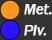
<style>
.page{position:relative;width:52px;height:40px;background:#333333}
.page>*{position:absolute;margin:0}
.t1{font:25px "FranklinGothic-MediumItalic";color:#f3f3f3;font-weight:bold}
</style>
<div class="page">
<p class="t1" style="left:24px;top:4px;width:28px;height:11px">Met.</p>
<p class="t1" style="left:24px;top:25px;width:23px;height:11px">Plv.</p>
</div>
